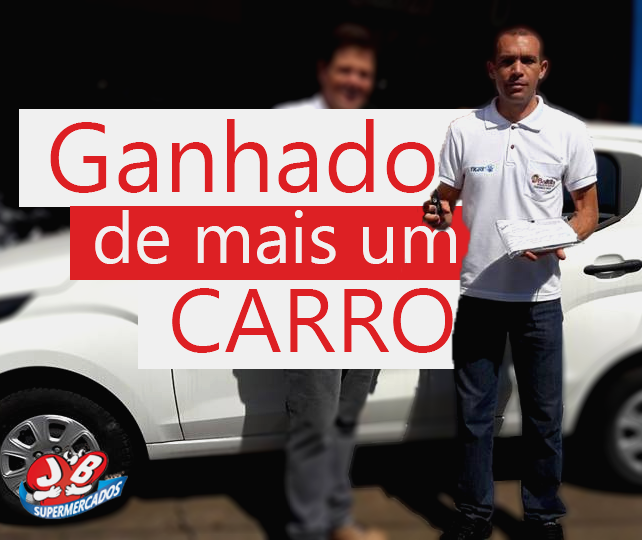
<style>
.page{position:relative;width:642px;height:540px;background:#060606}
.page>*{position:absolute;margin:0}
.t1{font:98px "SegoeUI";color:#d92226}
.t2{font:72px "SegoeUI";color:#ffffff}
.t3{font:90px "SegoeUI";color:#d92226}
</style>
<div class="page">
<p class="t1" style="left:50px;top:119px;width:423px;height:74px">Ganhador</p>
<p class="t2" style="left:95px;top:210px;width:361px;height:54px">de mais um</p>
<p class="t3" style="left:172px;top:288px;width:281px;height:65px">CARRO</p>
</div>
